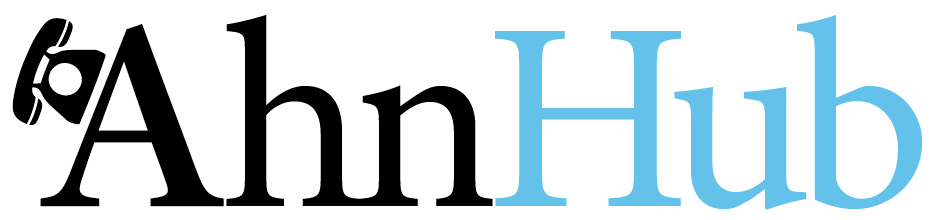
<style>
.page{position:relative;width:936px;height:220px;background:#ffffff}
.page>*{position:absolute;margin:0}
.t1{font:268.5px "MinionPro-Regular";letter-spacing:-0.05em;color:#64c2ea}
.t2{font:268.5px "MinionPro-Regular";letter-spacing:-0.05em;color:#000000}
</style>
<div class="page">
<p class="t1" style="left:226px;top:15px;width:696px;height:195px"><span class="t2">hn</span>Hub</p>
</div>
